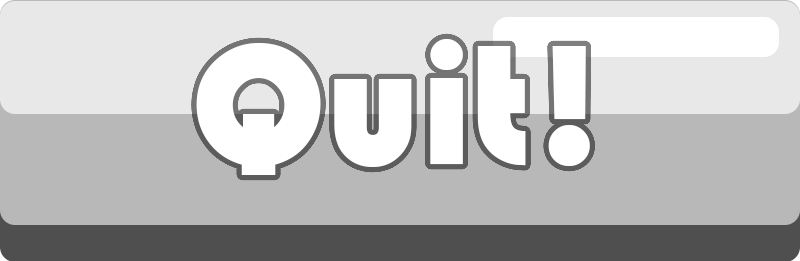
<style>
.page{position:relative;width:800px;height:261px;background:#b8b8b8}
.page>*{position:absolute;margin:0}
.t1{font:177px "Bauhaus93";color:#ffffff}
</style>
<div class="page">
<p class="t1" style="left:196px;top:39px;width:394px;height:136px">Quit!</p>
</div>
